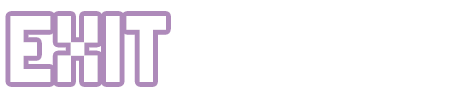
<style>
.page{position:relative;width:464px;height:98px;background:#ffffff}
.page>*{position:absolute;margin:0}
.t1{font:91.4px "DSPixelCyr";letter-spacing:0.025em;color:#ffffff}
</style>
<div class="page">
<p class="t1" style="left:10px;top:16px;width:156px;height:66px">exit</p>
</div>
